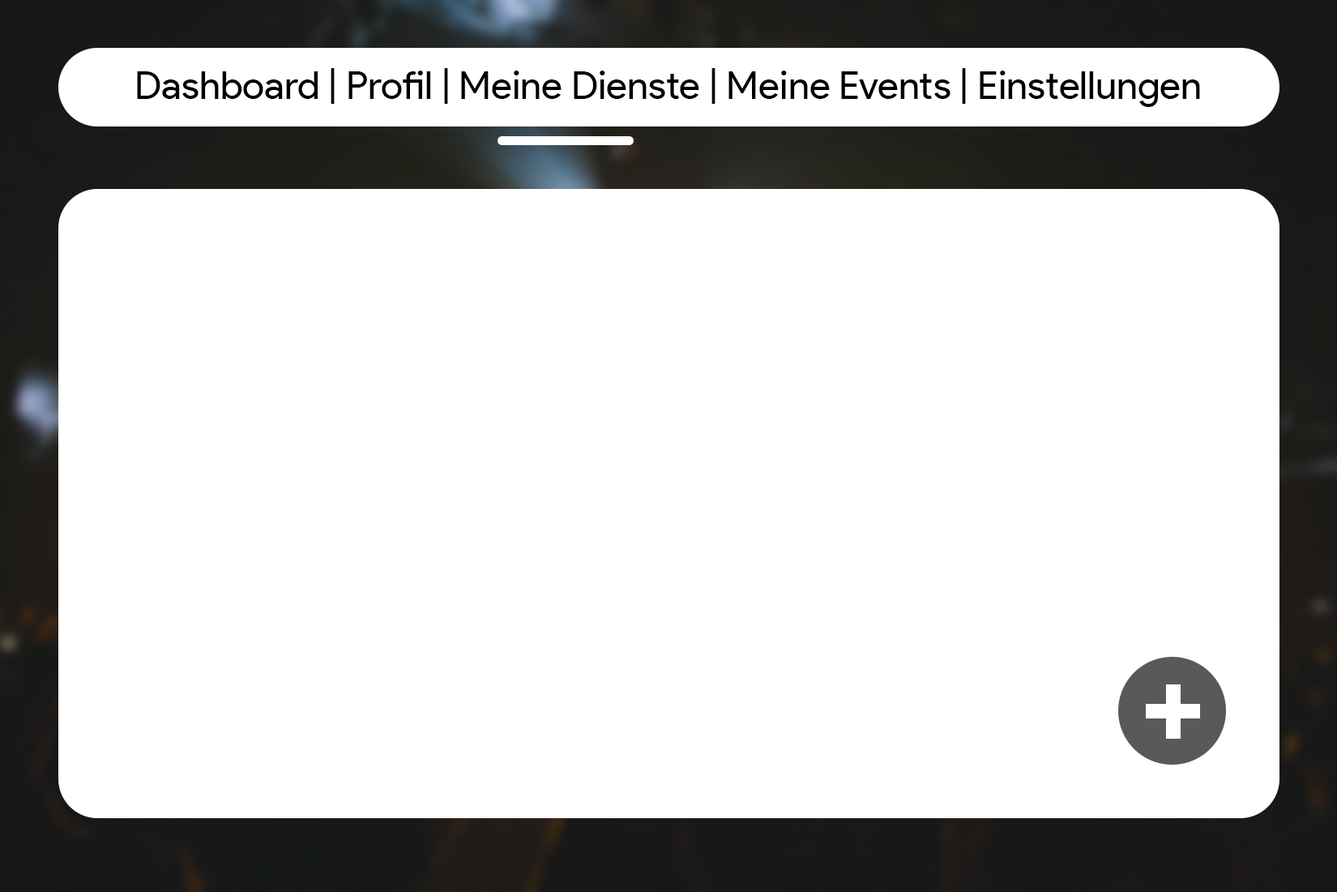
<style>
.page{position:relative;width:1337px;height:892px;background:#ffffff}
.page>*{position:absolute;margin:0}
.t1{font:39px "ProductSans-Regular";color:#000000}
</style>
<div class="page">
<p class="t1" style="left:137px;top:68px;width:1063px;height:39px">Dashboard | Profil | Meine Dienste | Meine Events | Einstellungen</p>
</div>
